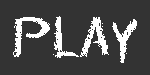
<style>
.page{position:relative;width:150px;height:75px;background:#333333}
.page>*{position:absolute;margin:0}
.t1{font:50px "Eraser-Regular";color:#ffffff}
</style>
<div class="page">
<p class="t1" style="left:13px;top:16px;width:124px;height:47px">play</p>
</div>
